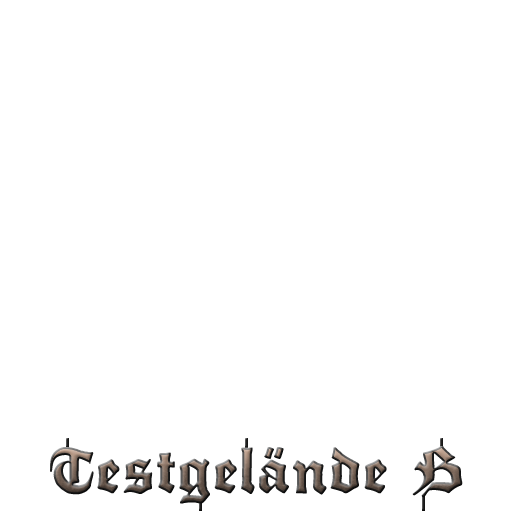
<style>
.page{position:relative;width:512px;height:512px;background:#ffffff}
.page>*{position:absolute;margin:0}
.t1{font:58px "FetteTrump-Deutsch";font-weight:bold}
</style>
<div class="page">
<p class="t1" style="left:50px;top:446px;width:413px;height:58px">Testgelände B</p>
</div>
